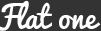
<style>
.page{position:relative;width:101px;height:31px;background:#333333}
.page>*{position:absolute;margin:0}
.t1{font:30px "Pacifico-Regular";color:#ffffff}
</style>
<div class="page">
<p class="t1" style="left:0px;top:0px;width:101px;height:31px">Flat one</p>
</div>
